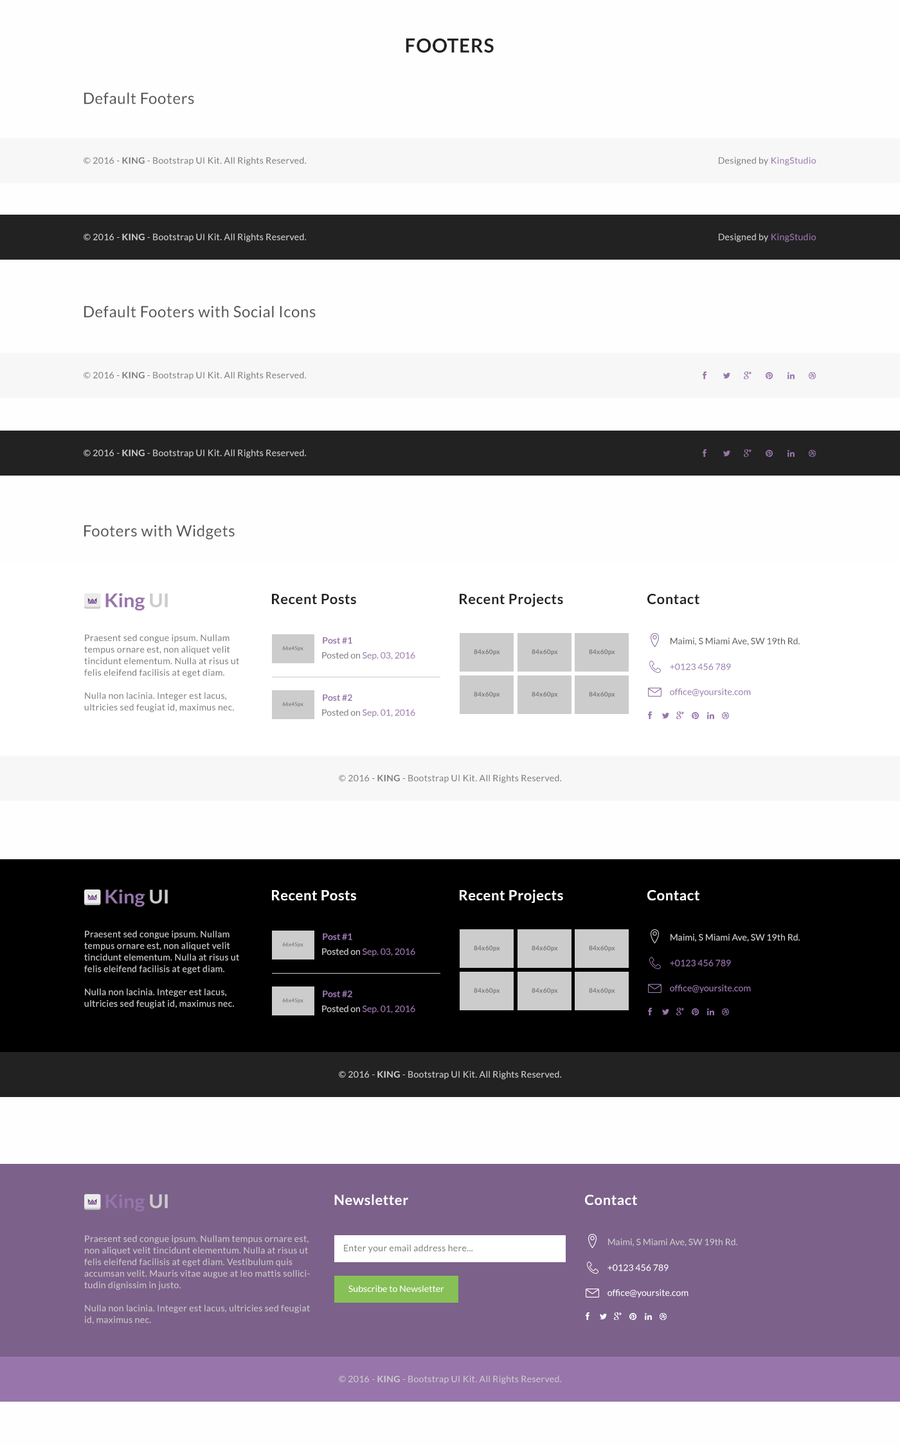
<style>
.page{position:relative;width:900px;height:1446px;background:#fefefe}
.page>*{position:absolute;margin:0}
.t1{font:19.3px "Lato-Bold";letter-spacing:0.025em;color:#222222}
.t2{font:15.4px "Lato-Regular";letter-spacing:0.025em;color:#555555}
.t3{font:9px "Lato-Regular";letter-spacing:0.025em;color:#777777}
.t4{font:9px "Lato-Bold";letter-spacing:0.025em;color:#777777}
.t5{font:9px "Lato-Regular";letter-spacing:0.025em;color:#9875ab}
.t6{font:9px "Lato-Regular";letter-spacing:0.025em;color:#cccccc}
.t7{font:9px "Lato-Bold";letter-spacing:0.025em;color:#cccccc}
.t8{font:14.1px "Lato-Bold";letter-spacing:0.025em;color:#222222}
.t9{font:9px/11.6px "Lato-Regular";letter-spacing:0.025em;color:#777777}
.t10{font:9px "Lato-Bold";color:#9775ab}
.t11{font:9px "Lato-Regular";letter-spacing:0.005em;color:#555555}
.t12{font:5.1px "Lato-Bold";letter-spacing:0.025em;color:#777777}
.t13{font:9px "Lato-Regular";color:#9875ab}
.t14{font:9px "Lato-Regular";color:#777777}
.t15{font:6.4px "Lato-Bold";letter-spacing:0.025em;color:#777777}
.t16{font:9px "Lato-Regular";letter-spacing:0.005em;color:#9775ab}
.t17{font:14.1px "Lato-Bold";letter-spacing:0.025em;color:#ffffff}
.t18{font:9px/11.6px "Lato-Regular";letter-spacing:0.025em;color:#cccccc}
.t19{font:9px "Lato-Regular";letter-spacing:0.005em;color:#cccccc}
.t20{font:9px "Lato-Regular";color:#cccccc}
.t21{font:9px "Lato-Regular";letter-spacing:0.005em;color:#ffffff}
.t22{font:9px "Lato-Regular";color:#ffffff}
</style>
<div class="page">
<p class="t1" style="left:406px;top:38px;width:88px;height:15px">FOOTERS</p>
<p class="t2" style="left:84px;top:93px;width:110px;height:11px">Default Footers</p>
<p class="t3" style="left:84px;top:157px;width:222px;height:9px">© 2016 - <span class="t4">KING</span> - Bootstrap UI Kit. All Rights Reserved.</p>
<p class="t3" style="left:719px;top:157px;width:97px;height:9px">Designed by <span class="t5">KingStudio</span></p>
<p class="t6" style="left:84px;top:233px;width:222px;height:9px">© 2016 - <span class="t7">KING</span> - Bootstrap UI Kit. All Rights Reserved.</p>
<p class="t6" style="left:719px;top:233px;width:97px;height:9px">Designed by <span class="t5">KingStudio</span></p>
<p class="t2" style="left:84px;top:306px;width:232px;height:12px">Default Footers with Social Icons</p>
<p class="t3" style="left:84px;top:372px;width:222px;height:9px">© 2016 - <span class="t4">KING</span> - Bootstrap UI Kit. All Rights Reserved.</p>
<p class="t6" style="left:84px;top:449px;width:222px;height:9px">© 2016 - <span class="t7">KING</span> - Bootstrap UI Kit. All Rights Reserved.</p>
<p class="t2" style="left:84px;top:525px;width:151px;height:15px">Footers with Widgets</p>
<p class="t8" style="left:460px;top:593px;width:103px;height:14px">Recent Projects</p>
<p class="t8" style="left:272px;top:594px;width:84px;height:10px">Recent Posts</p>
<p class="t8" style="left:647px;top:594px;width:52px;height:10px">Contact</p>
<p class="t9" style="left:84px;top:634px;width:155px;height:78px">Praesent sed congue ipsum. Nullam tempus ornare est, non aliquet velit tincidunt elementum. Nulla at risus ut felis eleifend facilisis at eget diam.<br><br>Nulla non lacinia. Integer est lacus, ultricies sed feugiat id, maximus nec.</p>
<p class="t10" style="left:323px;top:637px;width:29px;height:7px">Post #1</p>
<p class="t11" style="left:670px;top:638px;width:130px;height:8px">Maimi, S Miami Ave, SW 19th Rd.</p>
<p class="t12" style="left:282px;top:646px;width:21px;height:5px">66x45px</p>
<p class="t13" style="left:322px;top:652px;width:93px;height:9px"><span class="t14">Posted on </span>Sep. 03, 2016</p>
<p class="t15" style="left:474px;top:649px;width:26px;height:7px">84x60px</p>
<p class="t15" style="left:532px;top:649px;width:26px;height:7px">84x60px</p>
<p class="t15" style="left:589px;top:649px;width:26px;height:7px">84x60px</p>
<p class="t16" style="left:670px;top:663px;width:61px;height:7px">+0123 456 789</p>
<p class="t16" style="left:670px;top:688px;width:81px;height:9px">office@yoursite.com</p>
<p class="t12" style="left:282px;top:702px;width:21px;height:5px">66x45px</p>
<p class="t10" style="left:323px;top:694px;width:29px;height:7px">Post #2</p>
<p class="t15" style="left:474px;top:692px;width:26px;height:6px">84x60px</p>
<p class="t15" style="left:532px;top:692px;width:26px;height:6px">84x60px</p>
<p class="t15" style="left:589px;top:692px;width:26px;height:6px">84x60px</p>
<p class="t13" style="left:322px;top:709px;width:93px;height:9px"><span class="t14">Posted on </span>Sep. 01, 2016</p>
<p class="t3" style="left:339px;top:775px;width:222px;height:9px">© 2016 - <span class="t4">KING</span> - Bootstrap UI Kit. All Rights Reserved.</p>
<p class="t17" style="left:272px;top:890px;width:84px;height:11px">Recent Posts</p>
<p class="t17" style="left:460px;top:890px;width:103px;height:13px">Recent Projects</p>
<p class="t17" style="left:647px;top:890px;width:52px;height:11px">Contact</p>
<p class="t18" style="left:84px;top:931px;width:155px;height:78px">Praesent sed congue ipsum. Nullam tempus ornare est, non aliquet velit tincidunt elementum. Nulla at risus ut felis eleifend facilisis at eget diam.<br><br>Nulla non lacinia. Integer est lacus, ultricies sed feugiat id, maximus nec.</p>
<p class="t10" style="left:323px;top:933px;width:29px;height:8px">Post #1</p>
<p class="t19" style="left:670px;top:934px;width:130px;height:8px">Maimi, S Miami Ave, SW 19th Rd.</p>
<p class="t12" style="left:282px;top:942px;width:21px;height:6px">66x45px</p>
<p class="t13" style="left:322px;top:948px;width:93px;height:9px"><span class="t20">Posted on </span>Sep. 03, 2016</p>
<p class="t15" style="left:474px;top:946px;width:26px;height:6px">84x60px</p>
<p class="t15" style="left:532px;top:946px;width:26px;height:6px">84x60px</p>
<p class="t15" style="left:589px;top:946px;width:26px;height:6px">84x60px</p>
<p class="t16" style="left:670px;top:960px;width:61px;height:7px">+0123 456 789</p>
<p class="t15" style="left:474px;top:988px;width:26px;height:7px">84x60px</p>
<p class="t15" style="left:532px;top:988px;width:26px;height:7px">84x60px</p>
<p class="t15" style="left:589px;top:988px;width:26px;height:7px">84x60px</p>
<p class="t16" style="left:670px;top:985px;width:81px;height:8px">office@yoursite.com</p>
<p class="t12" style="left:282px;top:998px;width:21px;height:6px">66x45px</p>
<p class="t10" style="left:323px;top:991px;width:29px;height:7px">Post #2</p>
<p class="t13" style="left:322px;top:1005px;width:93px;height:9px"><span class="t20">Posted on </span>Sep. 01, 2016</p>
<p class="t6" style="left:339px;top:1071px;width:222px;height:9px">© 2016 - <span class="t7">KING</span> - Bootstrap UI Kit. All Rights Reserved.</p>
<p class="t17" style="left:334px;top:1194px;width:74px;height:11px">Newsletter</p>
<p class="t17" style="left:585px;top:1195px;width:52px;height:10px">Contact</p>
<p class="t18" style="left:84px;top:1236px;width:226px;height:89px">Praesent sed congue ipsum. Nullam tempus ornare est, non aliquet velit tincidunt elementum. Nulla at risus ut felis eleifend facilisis at eget diam. Vestibulum quis accumsan velit. Mauris vitae augue at leo mattis sollicitudin dignissim in justo.<br><br>Nulla non lacinia. Integer est lacus, ultricies sed feugiat id, maximus nec.</p>
<p class="t19" style="left:608px;top:1239px;width:129px;height:8px">Maimi, S Miami Ave, SW 19th Rd.</p>
<p class="t3" style="left:344px;top:1245px;width:129px;height:9px">Enter your email address here...</p>
<p class="t21" style="left:608px;top:1264px;width:61px;height:8px">+0123 456 789</p>
<p class="t22" style="left:348px;top:1286px;width:96px;height:7px">Subscribe to Newsletter</p>
<p class="t21" style="left:608px;top:1290px;width:80px;height:8px">office@yoursite.com</p>
<p class="t6" style="left:339px;top:1376px;width:222px;height:9px">© 2016 - <span class="t7">KING</span> - Bootstrap UI Kit. All Rights Reserved.</p>
</div>
